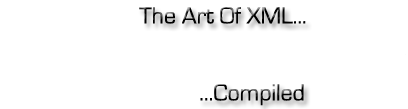
<style>
.page{position:relative;width:408px;height:109px;background:#ffffff}
.page>*{position:absolute;margin:0}
.t1{font:41px "EurostileRegular";color:#000000}
</style>
<div class="page">
<p class="t1" style="left:139px;top:7px;width:167px;height:17px">The Art Of XML...</p>
<p class="t1" style="left:200px;top:84px;width:104px;height:22px">...Compiled</p>
</div>
